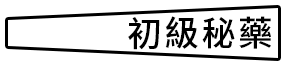
<style>
.page{position:relative;width:286px;height:66px;background:#ffffff}
.page>*{position:absolute;margin:0}
.t1{font:35px "NotoSansCJKtc-Medium";letter-spacing:0.06em;color:#000000}
</style>
<div class="page">
<p class="t1" style="left:128px;top:16px;width:143px;height:34px">初級秘藥</p>
</div>
